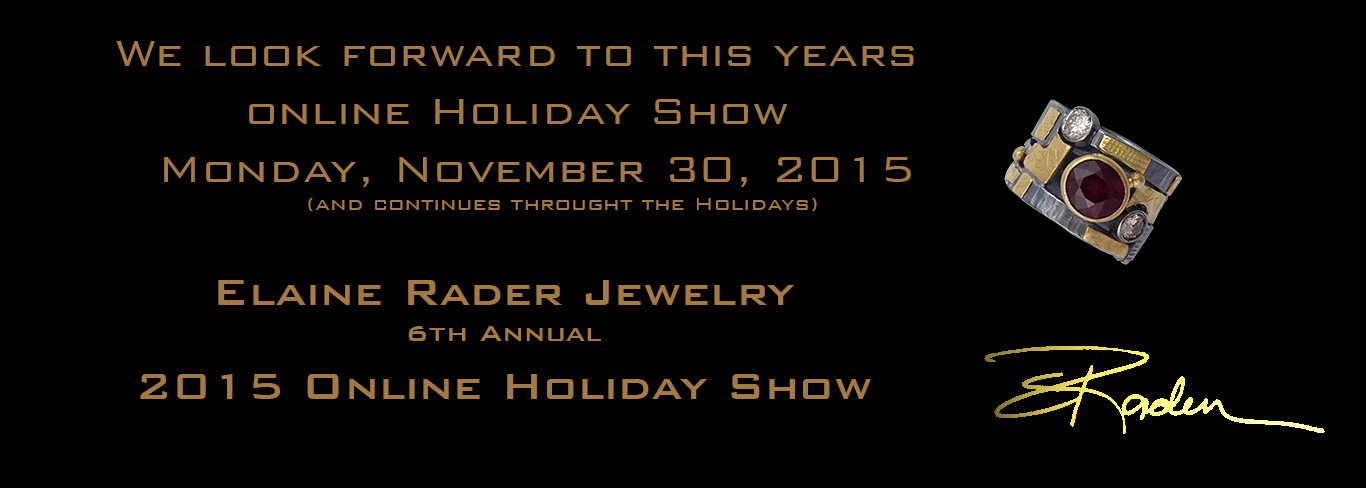
<style>
.page{position:relative;width:1366px;height:488px;background:#010101}
.page>*{position:absolute;margin:0}
.t1{font:48px "BankGothicBT-Light";color:#a47942}
.t2{font:24px "BankGothicBT-Light";color:#a47942}
.t3{font:48px "BankGothicBT-Medium";color:#a47942}
.t4{font:30px "BankGothicBT-Medium";color:#a47942}
</style>
<div class="page">
<p class="t1" style="left:116px;top:41px;width:798px;height:170px;text-align:center">We look forward to this years online Holiday Show <br>   Monday, November 30, 2015<br>            <span class="t2">(and continues throught the Holidays)</span></p>
<p class="t3" style="left:140px;top:280px;width:731px;height:119px;text-align:center">Elaine Rader Jewelry <br><span class="t4">6th Annual<br></span>2015 Online Holiday Show</p>
</div>
